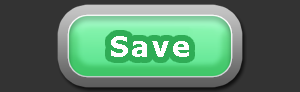
<style>
.page{position:relative;width:300px;height:92px;background:#333333}
.page>*{position:absolute;margin:0}
.t1{font:29.2px "Tahoma-Bold";letter-spacing:0.1em;color:#ffffff}
</style>
<div class="page">
<p class="t1" style="left:111px;top:36px;width:78px;height:21px">Save</p>
</div>
